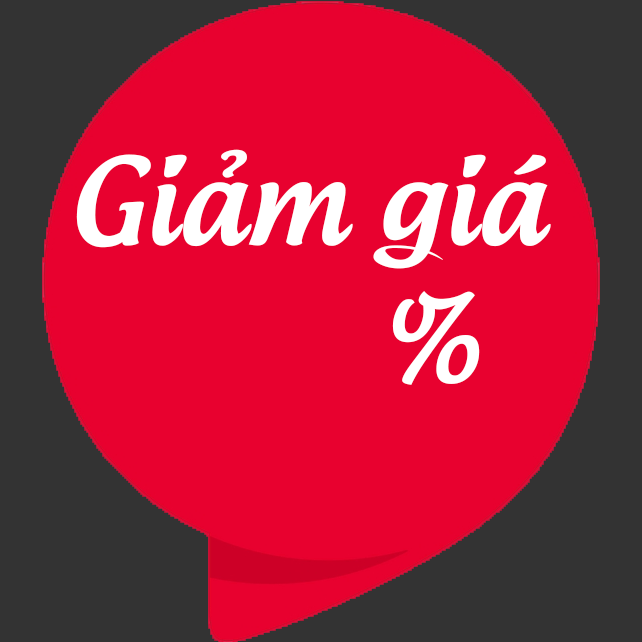
<style>
.page{position:relative;width:642px;height:642px;background:#e8012f}
.page>*{position:absolute;margin:0}
.t1{font:115px "UTM-Androgyne";color:#ffffff}
</style>
<div class="page">
<p class="t1" style="left:76px;top:149px;width:475px;height:236px;text-align:right">Giảm giá<br>%</p>
</div>
